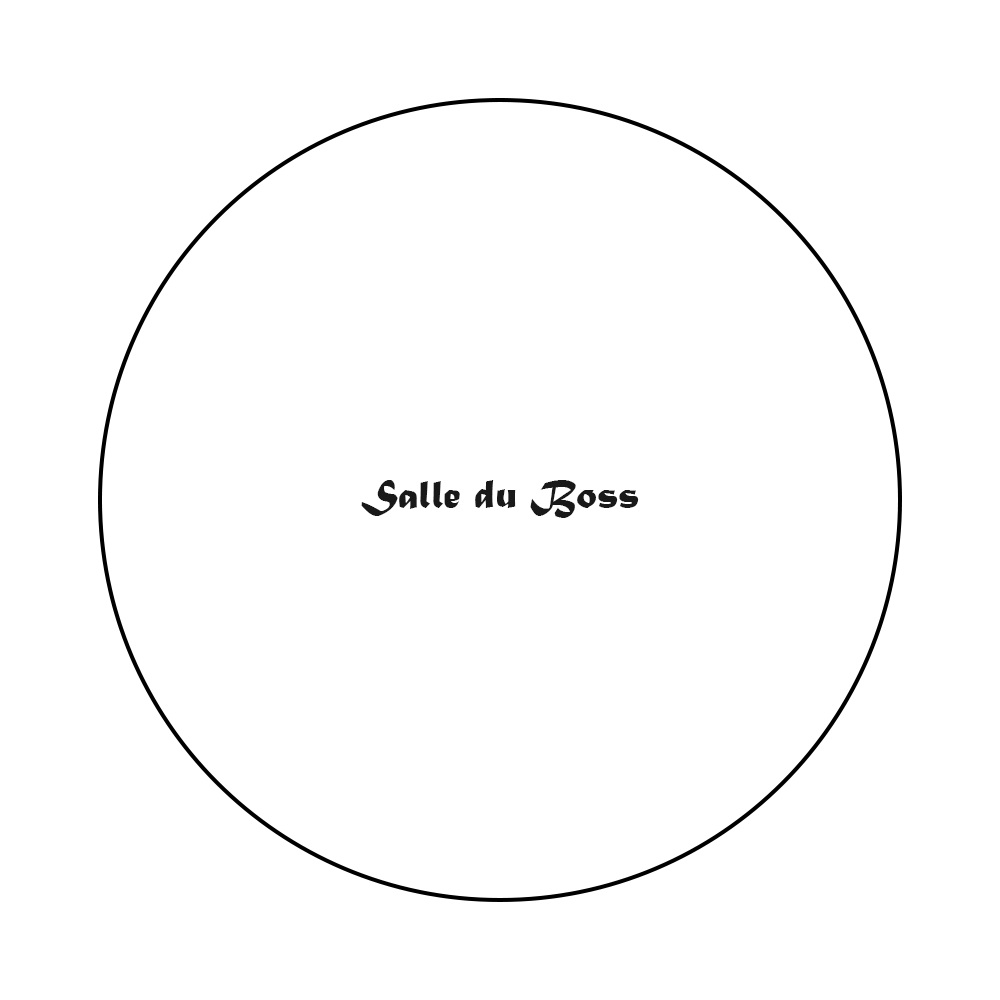
<style>
.page{position:relative;width:1000px;height:1000px;background:#ffffff}
.page>*{position:absolute;margin:0}
.t1{font:41.7px "MaturaMTScriptCapitals";color:#191919}
</style>
<div class="page">
<p class="t1" style="left:361px;top:480px;width:278px;height:38px">Salle du Boss</p>
</div>
